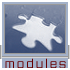
<style>
.page{position:relative;width:70px;height:70px}
.page>*{position:absolute;margin:0}
.t1{font:14px "RationalInteger";letter-spacing:0.17em;color:#660000}
</style>
<div class="page">
<p class="t1" style="left:5px;top:58px;width:61px;height:10px">modules</p>
</div>
